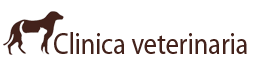
<style>
.page{position:relative;width:271px;height:62px;background:#ffffff}
.page>*{position:absolute;margin:0}
.t1{font:30px "Myriad-Roman";letter-spacing:-0.01em;color:#43221b;scale:0.9 1}
</style>
<div class="page">
<p class="t1" style="left:54px;top:32px;width:193px;height:22px">Clinica veterinaria</p>
</div>
